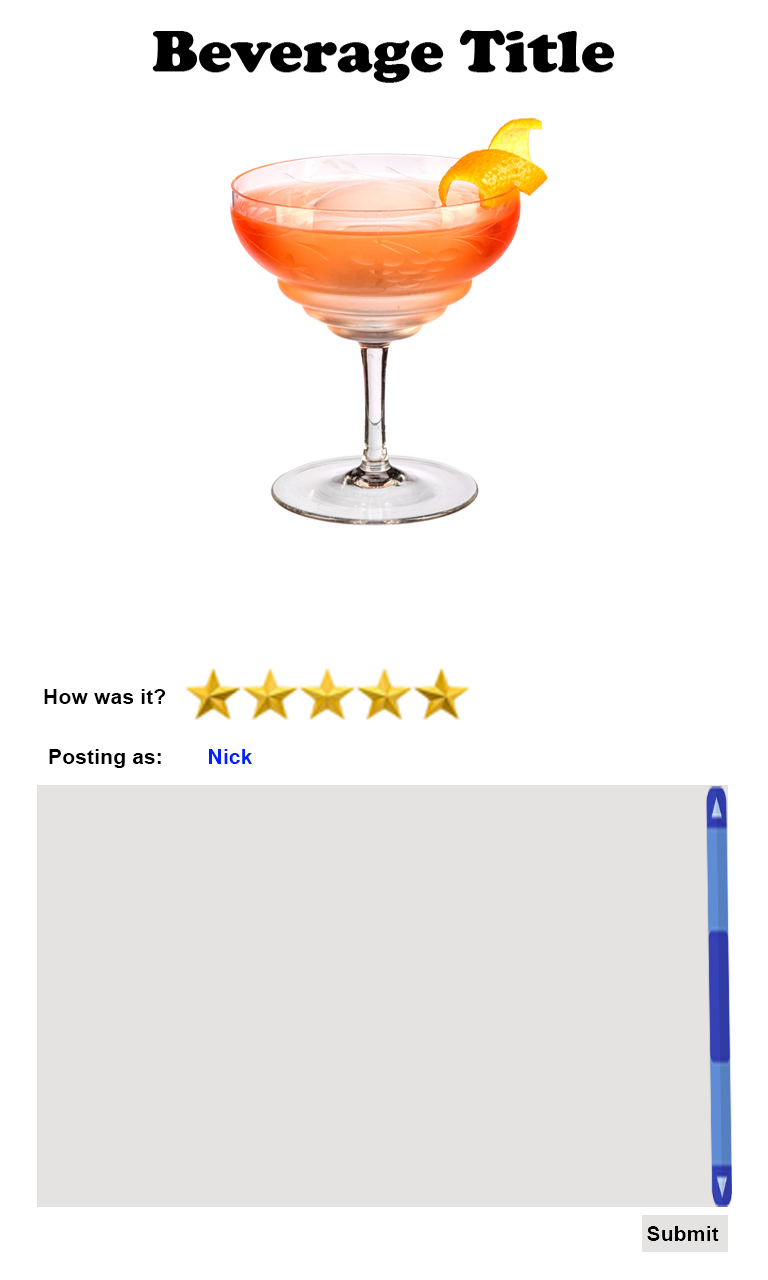
<style>
.page{position:relative;width:768px;height:1280px;background:#ffffff}
.page>*{position:absolute;margin:0}
.t1{font:21.3px "Arial-BoldMT";color:#000000}
.t2{font:21.3px "Arial-BoldMT";color:#0022ff}
</style>
<div class="page">
<p class="t1" style="left:44px;top:689px;width:122px;height:15px">How was it?</p>
<p class="t1" style="left:49px;top:749px;width:112px;height:19px">Posting as:</p>
<p class="t2" style="left:209px;top:749px;width:43px;height:15px">Nick</p>
</div>
